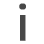
<style>
.page{position:relative;width:44px;height:44px;background:#ffffff}
.page>*{position:absolute;margin:0}
.t1{font:50px "SegoeUI";color:#484848;font-weight:bold}
</style>
<div class="page">
<p class="t1" style="left:19px;top:3px;width:7px;height:38px">i</p>
</div>
